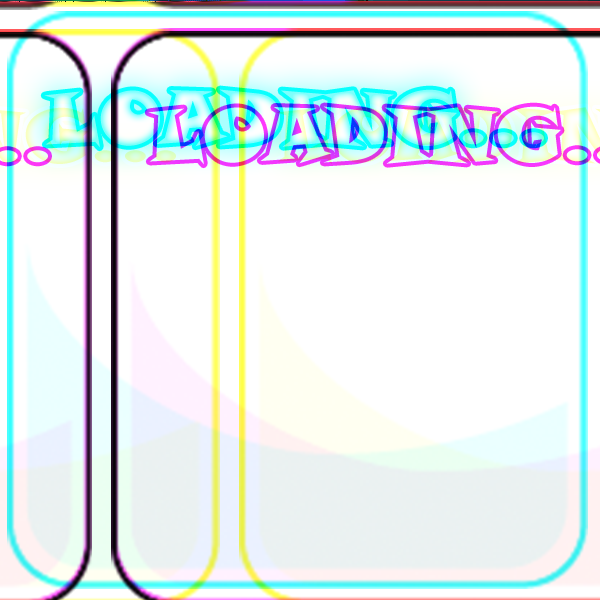
<style>
.page{position:relative;width:600px;height:600px;background:#ffffff}
.page>*{position:absolute;margin:0}
.t1{font:74.7px "SnapITC-Regular"}
</style>
<div class="page">
<p class="t1" style="left:44px;top:88px;width:500px;height:59px">LOADING...</p>
</div>
